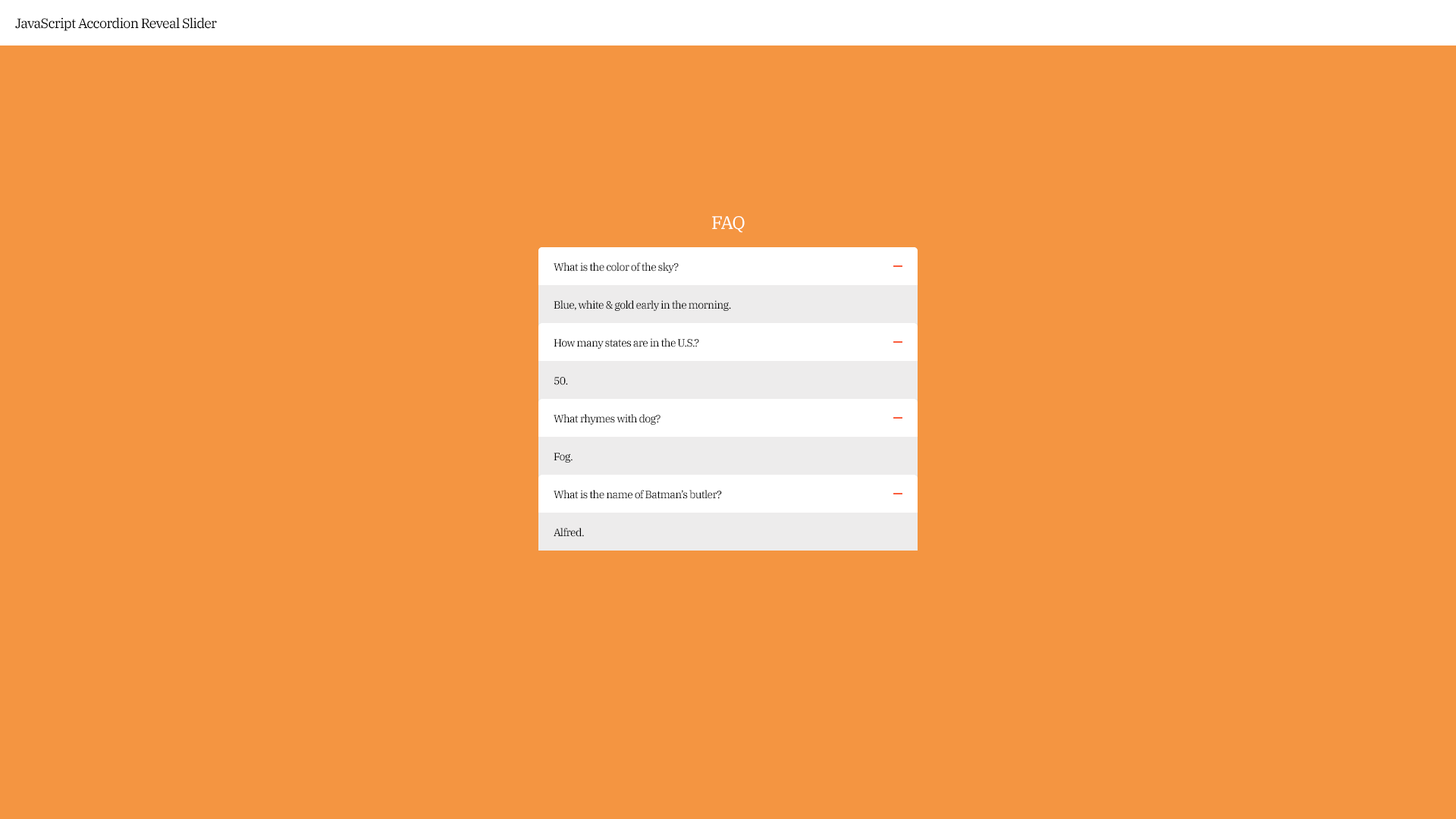
<style>
.page{position:relative;width:1456px;height:819px;background:#f49541}
.page>*{position:absolute;margin:0}
.t1{font:13.6px "IBMPlexSerif";letter-spacing:-0.046em;color:#000000}
.t2{font:18.2px "IBMPlexSerif";letter-spacing:-0.046em;color:#ffffff}
.t3{font:10.6px "IBMPlexSerif";letter-spacing:-0.046em;color:#000000}
</style>
<div class="page">
<p class="t1" style="left:15px;top:17px;width:202px;height:14px">JavaScript Accordion Reveal Slider</p>
<p class="t2" style="left:712px;top:216px;width:33px;height:17px">FAQ</p>
<p class="t3" style="left:554px;top:262px;width:125px;height:11px">What is the color of the sky?</p>
<p class="t3" style="left:554px;top:300px;width:177px;height:11px">Blue, white &amp; gold early in the morning.</p>
<p class="t3" style="left:554px;top:338px;width:145px;height:11px">How many states are in the U.S.?</p>
<p class="t3" style="left:554px;top:377px;width:14px;height:8px">50.</p>
<p class="t3" style="left:554px;top:414px;width:106px;height:11px">What rhymes with dog?</p>
<p class="t3" style="left:554px;top:453px;width:19px;height:10px">Fog.</p>
<p class="t3" style="left:554px;top:490px;width:168px;height:9px">What is the name of Batman’s butler?</p>
<p class="t3" style="left:554px;top:528px;width:30px;height:9px">Alfred.</p>
</div>
